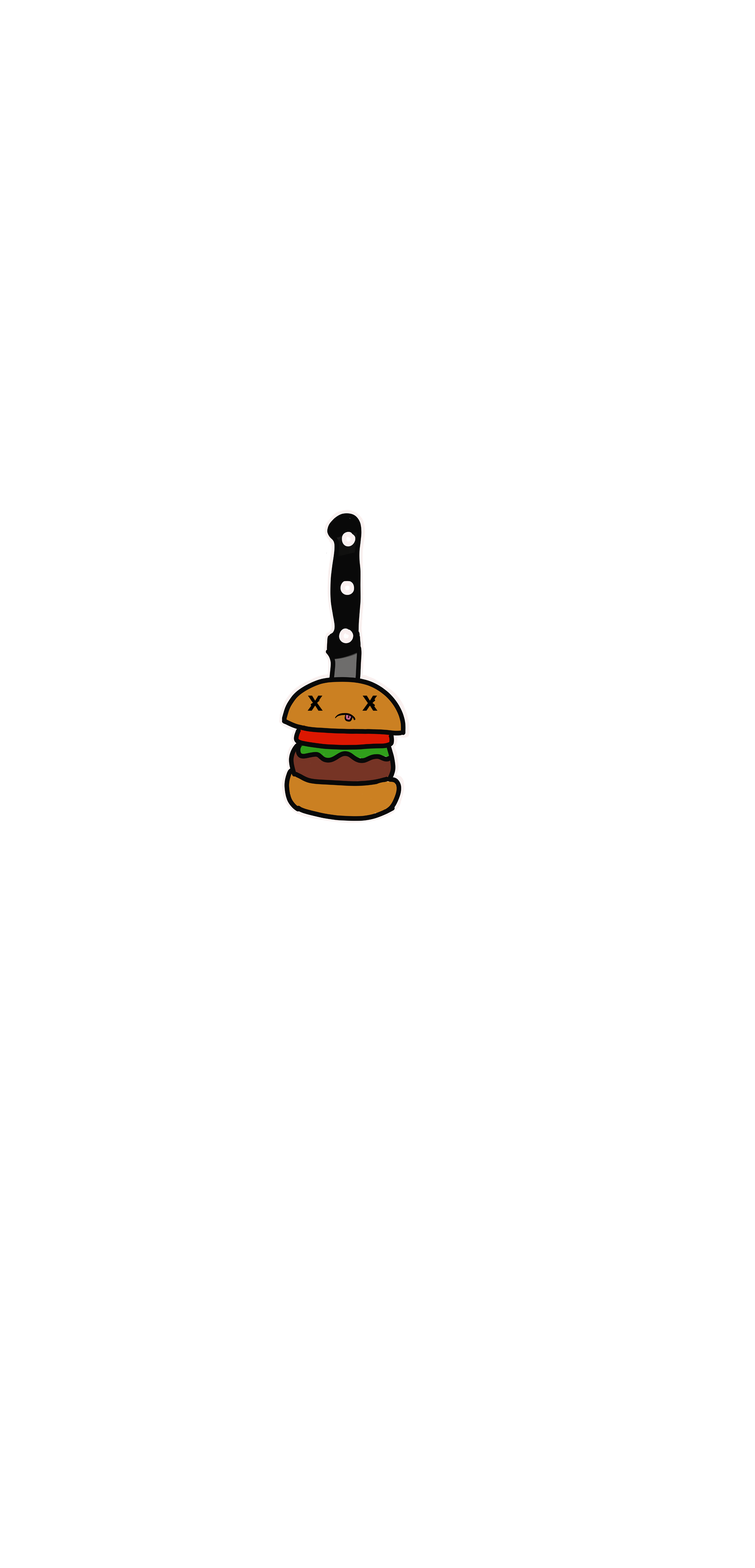
<style>
.page{position:relative;width:755px;height:1568px;background:#ffffff}
.page>*{position:absolute;margin:0}
.t1{font:22.4px "CoolveticaRg-Regular";letter-spacing:0.062em;color:#000000;scale:1.14 1}
</style>
<div class="page">
<p class="t1" style="left:308px;top:696px;width:15px;height:15px">X</p>
<p class="t1" style="left:362px;top:696px;width:16px;height:15px">X</p>
</div>
